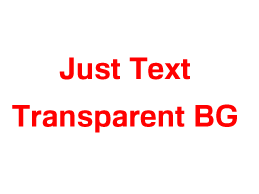
<style>
.page{position:relative;width:259px;height:194px;background:#ffffff}
.page>*{position:absolute;margin:0}
.t1{font:30px/47.4px "FamiliarPro-Bold";color:#ff0000}
</style>
<div class="page">
<p class="t1" style="left:12px;top:57px;width:225px;height:76px;text-align:center">Just Text<br>Transparent BG</p>
</div>
